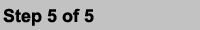
<style>
.page{position:relative;width:200px;height:30px;background:#c2c2c2}
.page>*{position:absolute;margin:0}
.t1{font:18px "Arial-BoldMT";color:#000000}
</style>
<div class="page">
<p class="t1" style="left:3px;top:8px;width:91px;height:18px">Step 5 of 5</p>
</div>
